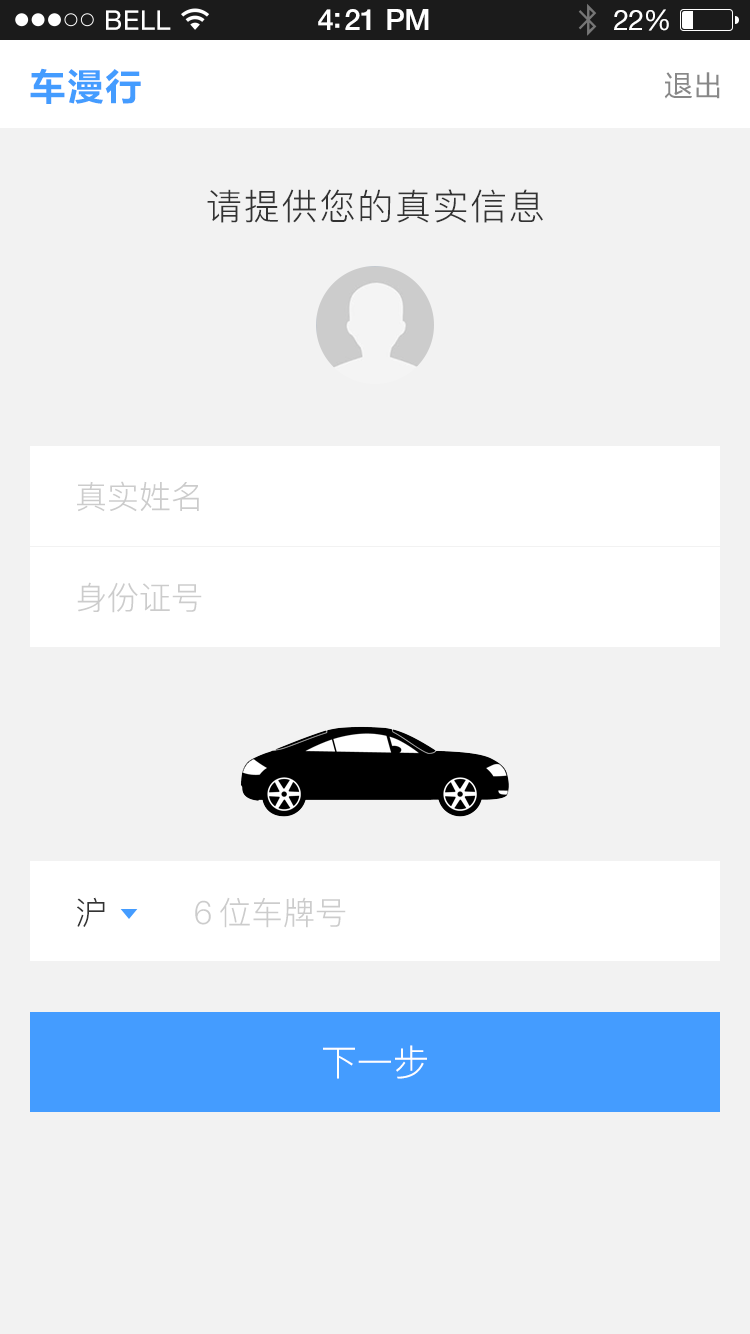
<style>
.page{position:relative;width:750px;height:1334px;background:#f2f2f2}
.page>*{position:absolute;margin:0}
.t1{font:36px "MicrosoftYaHei-Bold";letter-spacing:0.05em;color:#449cff}
.t2{font:28px "MicrosoftYaHei";letter-spacing:0.05em;color:#888888}
.t3{font:36px "PingFang-SC-Regular";letter-spacing:0.05em;color:#333333}
.t4{font:32px "PingFang-SC-Regular";color:#cccccc}
.t5{font:32px "PingFang-SC-Regular";color:#333333}
.t6{font:36px "PingFang-SC-Regular";color:#ffffff}
</style>
<div class="page">
<p class="t1" style="left:30px;top:68px;width:111px;height:36px">车漫行</p>
<p class="t2" style="left:664px;top:72px;width:56px;height:27px">退出</p>
<p class="t3" style="left:207px;top:189px;width:336px;height:34px">请提供您的真实信息</p>
<p class="t4" style="left:77px;top:481px;width:122px;height:31px">真实姓名</p>
<p class="t4" style="left:77px;top:582px;width:125px;height:31px">身份证号</p>
<p class="t5" style="left:77px;top:897px;width:28px;height:30px">沪</p>
<p class="t4" style="left:195px;top:897px;width:151px;height:31px">６位车牌号</p>
<p class="t6" style="left:323px;top:1045px;width:104px;height:34px">下一步</p>
</div>
